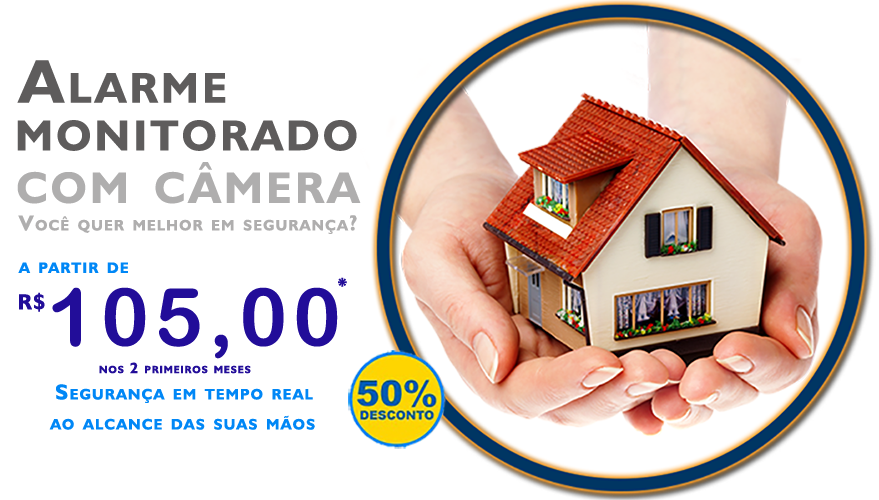
<style>
.page{position:relative;width:879px;height:500px;background:#ffffff}
.page>*{position:absolute;margin:0}
.t1{font:61.9px "Humanist521BT-Bold";letter-spacing:0.075em;color:#5e5c5c;font-variant:small-caps}
.t2{font:63.4px "Humanist521BT-Bold";letter-spacing:0.075em;color:#afaeae;font-variant:small-caps}
.t3{font:21.7px "Humanist521BT-Bold";letter-spacing:0.075em;color:#afaeae;font-variant:small-caps}
.t4{font:21.7px "Humanist521BT-Bold";letter-spacing:0.075em;color:#0087f6;font-variant:small-caps}
.t5{font:21.7px "Humanist521BT-Bold";letter-spacing:0.075em;color:#220d99;font-variant:small-caps}
.t6{font:80.1px "ArialRoundedMTBold";letter-spacing:0.075em;color:#220d99;font-variant:small-caps}
.t7{font:15px "Humanist521BT-Bold";letter-spacing:0.075em;color:#220d99;font-variant:small-caps}
</style>
<div class="page">
<p class="t1" style="left:17px;top:60px;width:209px;height:43px">Alarme</p>
<p class="t1" style="left:17px;top:120px;width:340px;height:31px">monitorado</p>
<p class="t2" style="left:17px;top:162px;width:344px;height:42px">com câmera</p>
<p class="t3" style="left:18px;top:215px;width:339px;height:19px">Você quer melhor em segurança?</p>
<p class="t4" style="left:18px;top:262px;width:110px;height:11px">a partir de</p>
<p class="t5" style="left:338px;top:277px;width:9px;height:10px">*</p>
<p class="t5" style="left:19px;top:292px;width:26px;height:20px">R$</p>
<p class="t6" style="left:52px;top:287px;width:286px;height:72px">105,00</p>
<p class="t7" style="left:99px;top:362px;width:152px;height:12px">nos 2 primeiros meses</p>
<p class="t4" style="left:56px;top:384px;width:257px;height:19px">Segurança em tempo real</p>
<p class="t4" style="left:49px;top:415px;width:266px;height:15px">ao alcance das suas mãos</p>
</div>
